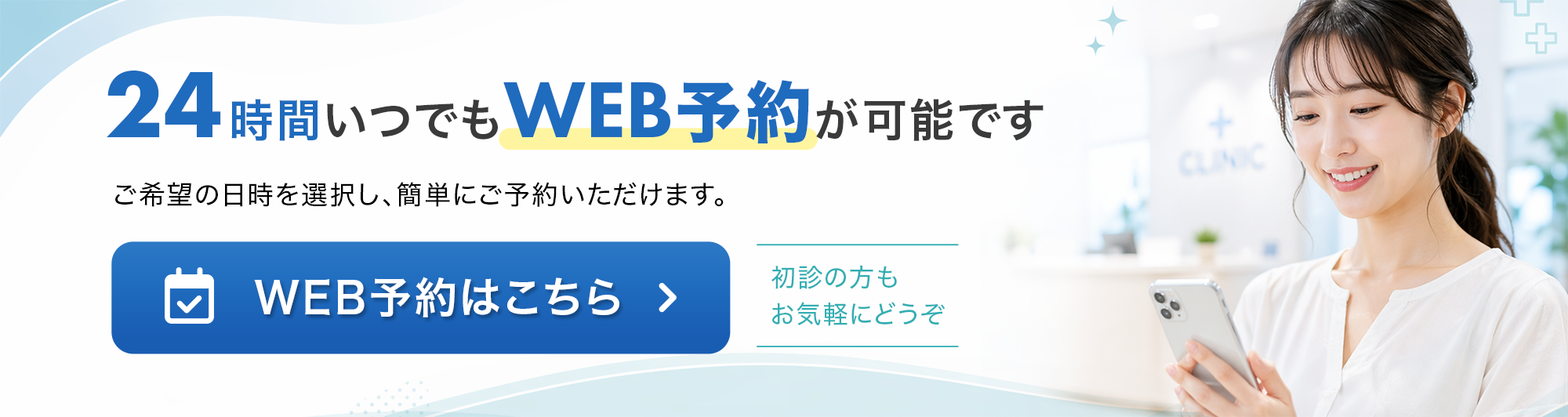
<style>
.page{position:relative;width:1568px;height:417px;background:#fefefe}
.page>*{position:absolute;margin:0}
.t1{font:45.5px "HiraginoSans-W6";letter-spacing:0.05em;color:#3a3a3a}
.t2{font:98.1px "FuturaPT-Bold";letter-spacing:0.05em;color:#1f6bbe}
.t3{font:45.5px "HiraginoSans-W6";letter-spacing:0.05em;color:#1f6bbe}
.t4{font:82px "FuturaPT-Heavy";letter-spacing:0.05em;color:#1f6bbe}
.t5{font:66.6px "HiraginoSans-W8";letter-spacing:0.05em;color:#1f6bbe}
.t6{font:26.7px "HiraginoSans-W4";letter-spacing:0.05em;color:#000000}
.t7{font:25.4px/36.4px "HiraginoSans-W4";letter-spacing:0.05em;color:#30aeb3}
.t8{font:43.2px "HiraginoSans-W6";letter-spacing:0.05em;color:#ffffff}
</style>
<div class="page">
<p class="t1" style="left:107px;top:70px;width:937px;height:73px"><span class="t2">24</span><span class="t3">時間</span>いつでも<span class="t4">WEB</span><span class="t5">予約</span>が可能です</p>
<p class="t6" style="left:115px;top:182px;width:609px;height:25px">ご希望の日時を選択し、簡単にご予約いただけます。</p>
<p class="t7" style="left:771px;top:265px;width:175px;height:61px">初診の方も<br>お気軽にどうぞ</p>
<p class="t8" style="left:254px;top:277px;width:365px;height:41px">WEB予約はこちら</p>
</div>
